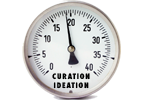
<style>
.page{position:relative;width:144px;height:100px;background:#ffffff}
.page>*{position:absolute;margin:0}
.t1{font:7.2px "Futura-CondensedExtraBold";letter-spacing:0.13em;color:#000000}
</style>
<div class="page">
<p class="t1" style="left:52px;top:73px;width:38px;height:16px;text-align:center">CURATION<br>IDEATION</p>
</div>
